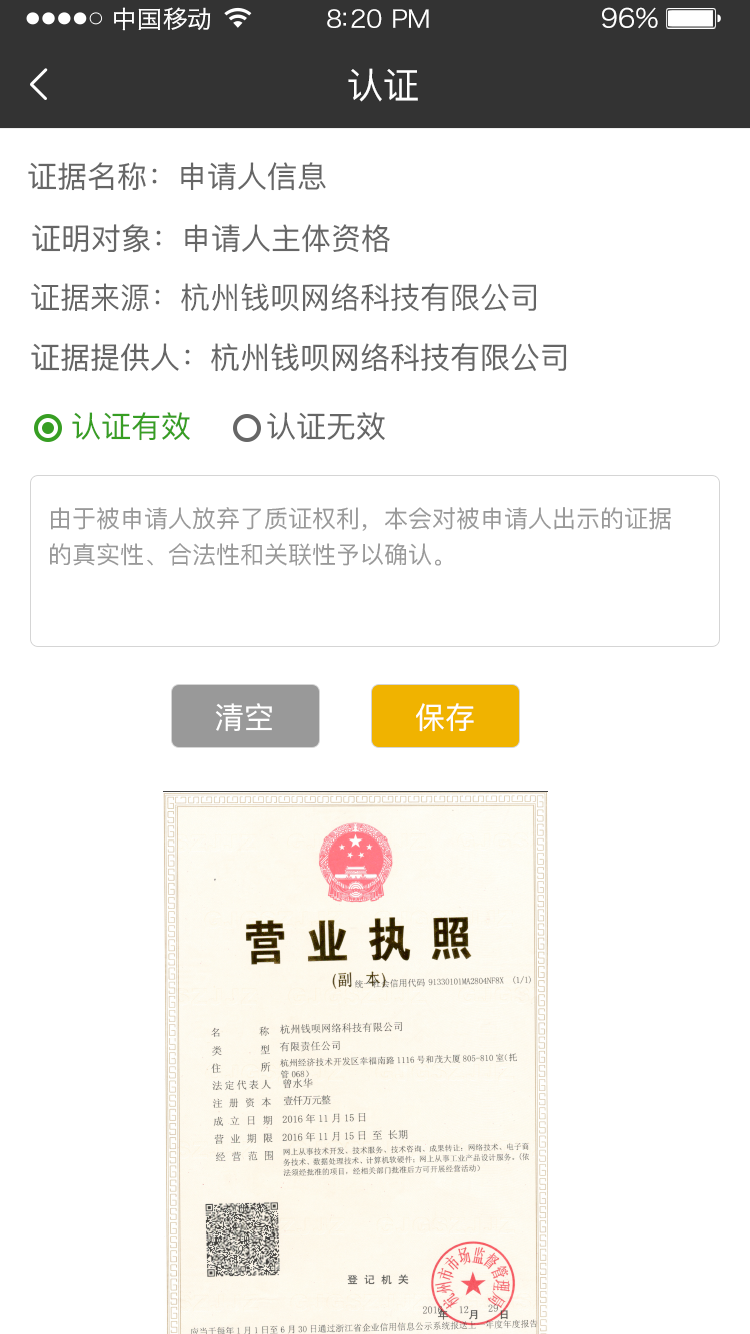
<style>
.page{position:relative;width:750px;height:1334px;background:#ffffff}
.page>*{position:absolute;margin:0}
.t1{font:24px "HiraginoSansGB-W3";letter-spacing:0.02em;color:#ffffff;scale:1.03 1}
.t2{font:24px "HiraginoSansGB-W3";letter-spacing:-0.02em;color:#ffffff;scale:1.03 1}
.t3{font:26.2px "HiraginoSansGB-W3";letter-spacing:-0.02em;color:#ffffff;scale:1.03 1}
.t4{font:36px "PingFangSC-Regular";letter-spacing:-0.02em;color:#ffffff}
.t5{font:30px "PingFangSC-Regular";color:#666666}
.t6{font:30px "PingFangSC-Regular";color:#379e23}
.t7{font:24px/36px "PingFangSC-Regular";color:#999999}
.t8{font:30px "PingFangSC-Regular";letter-spacing:-0.02em;color:#ffffff}
</style>
<div class="page">
<p class="t1" style="left:114px;top:7px;width:97px;height:24px">中国移动</p>
<p class="t2" style="left:327px;top:9px;width:102px;height:19px">8:20 PM</p>
<p class="t3" style="left:602px;top:7px;width:56px;height:22px">96%</p>
<p class="t4" style="left:348px;top:68px;width:70px;height:34px">认证</p>
<p class="t5" style="left:28px;top:162px;width:298px;height:29px">证据名称：申请人信息</p>
<p class="t5" style="left:32px;top:224px;width:358px;height:29px">证明对象：申请人主体资格</p>
<p class="t5" style="left:31px;top:283px;width:505px;height:28px">证据来源：杭州钱呗网络科技有限公司</p>
<p class="t5" style="left:31px;top:343px;width:536px;height:29px">证据提供人：杭州钱呗网络科技有限公司</p>
<p class="t6" style="left:72px;top:412px;width:118px;height:29px">认证有效</p>
<p class="t5" style="left:267px;top:412px;width:118px;height:28px">认证无效</p>
<p class="t7" style="left:50px;top:507px;width:621px;height:59px">由于被申请人放弃了质证权利，本会对被申请人出示的证据<br>的真实性、合法性和关联性予以确认。</p>
<p class="t8" style="left:215px;top:703px;width:57px;height:29px">清空</p>
<p class="t8" style="left:416px;top:703px;width:58px;height:29px">保存</p>
</div>
